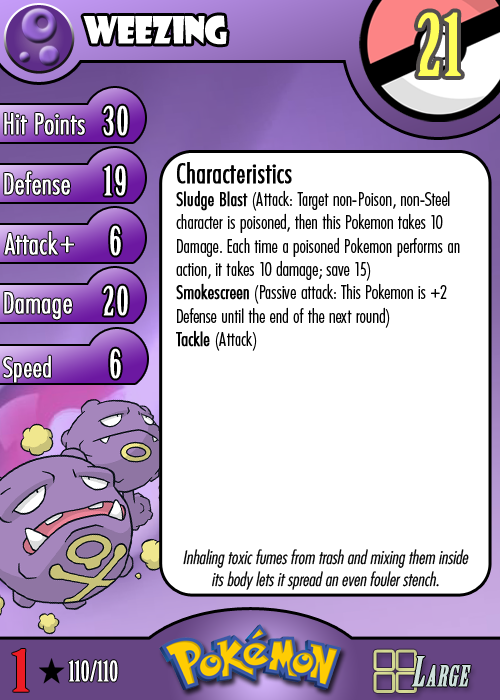
<style>
.page{position:relative;width:500px;height:700px;background:#ffffff}
.page>*{position:absolute;margin:0}
.t1{font:36.7px "ShowcardGothic-Reg";letter-spacing:-0.025em;color:#ffffff;scale:0.91 1}
.t2{font:83.3px "BirchStd";letter-spacing:0.025em;color:#fffd59;font-weight:bold}
.t3{font:27.8px "Futura-CondensedLight";color:#ffffff;font-weight:bold}
.t4{font:38.9px "BirchStd";letter-spacing:0.035em;color:#ffffff;font-weight:bold}
.t5{font:19.4px "FuturaCondensedBQ-Light";color:#010101}
.t6{font:27.8px "FuturaCondensedBQ-Light";color:#010101;font-weight:bold}
.t7{font:19.4px "FuturaCondensedBQ-Light";color:#010101;font-weight:bold}
.t8{font:30.6px "Futura-CondensedLight";color:#ffffff;font-weight:bold}
.t9{font:27.8px "FuturaCondensedBQ-Light";color:#ffffff;font-weight:bold}
.t10{font:18.1px "Futura-CondensedLight";color:#010101;font-style:italic}
.t11{font:55.6px "BirchStd";color:#ed1c24;font-weight:bold;scale:1.5 1}
.t12{font:27.8px "BirchStd";color:#ffffff;font-weight:bold}
</style>
<div class="page">
<p class="t1" style="left:83px;top:15px;width:144px;height:30px">weezing</p>
<p class="t2" style="left:418px;top:12px;width:43px;height:64px">21</p>
<p class="t3" style="left:4px;top:113px;width:81px;height:22px">Hit Points</p>
<p class="t4" style="left:103px;top:105px;width:25px;height:31px">30</p>
<p class="t3" style="left:4px;top:171px;width:66px;height:24px">Defense</p>
<p class="t4" style="left:104px;top:165px;width:22px;height:31px">19</p>
<p class="t5" style="left:176px;top:162px;width:284px;height:189px"><span class="t6">Characteristics<br></span><span class="t7">Sludge Blast</span> (Attack: Target non-Poison, non-Steel character is poisoned, then this Pokemon takes 10 Damage. Each time a poisoned Pokemon performs an action, it takes 10 damage; save 15)<br><span class="t7">Smokescreen</span> (Passive attack: This Pokemon is +2 Defense until the end of the next round)<br><span class="t7">Tackle </span>(Attack)</p>
<p class="t3" style="left:4px;top:231px;width:54px;height:24px">Attack</p>
<p class="t4" style="left:110px;top:225px;width:11px;height:31px">6</p>
<p class="t8" style="left:60px;top:236px;width:14px;height:17px">+</p>
<p class="t3" style="left:4px;top:292px;width:68px;height:28px">Damage</p>
<p class="t4" style="left:103px;top:285px;width:25px;height:31px">20</p>
<p class="t4" style="left:110px;top:348px;width:11px;height:31px">6</p>
<p class="t9" style="left:3px;top:355px;width:48px;height:28px">Speed</p>
<p class="t10" style="left:183px;top:549px;width:286px;height:41px;text-align:center">Inhaling toxic fumes from trash and mixing them inside its body lets it spread an even fouler stench.</p>
<p class="t11" style="left:12px;top:649px;width:17px;height:43px">1</p>
<p class="t12" style="left:68px;top:660px;width:50px;height:22px">110/110</p>
</div>
